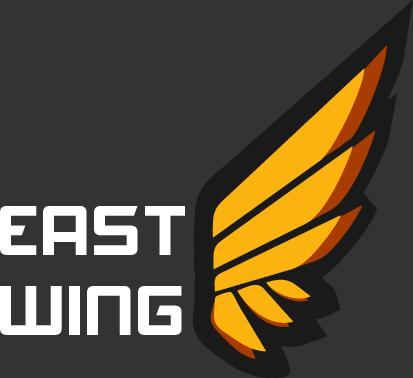
<style>
.page{position:relative;width:413px;height:378px;background:#333333}
.page>*{position:absolute;margin:0}
.t1{font:66.9px "Akashi";color:#ffffff;scale:1.11 1}
</style>
<div class="page">
<p class="t1" style="left:0px;top:206px;width:185px;height:129px">EAST<br>WING</p>
</div>
